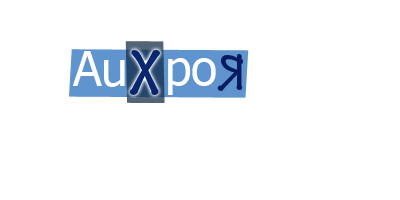
<style>
.page{position:relative;width:400px;height:200px;background:#ffffff}
.page>*{position:absolute;margin:0}
.t1{font:48px "Tahoma";color:#ffffff}
.t2{font:70.9px "TektonPro-BoldCond";color:#092771;scale:1.17 1}
.t3{font:55.1px "TektonPro-BoldCond";color:#071c60;scale:0.96 1}
</style>
<div class="page">
<p class="t1" style="left:72px;top:51px;width:53px;height:36px">Au</p>
<p class="t2" style="left:129px;top:50px;width:31px;height:45px">X</p>
<p class="t3" style="left:217px;top:54px;width:26px;height:37px;rotate:180deg">R</p>
<p class="t1" style="left:168px;top:58px;width:48px;height:37px">po</p>
</div>
